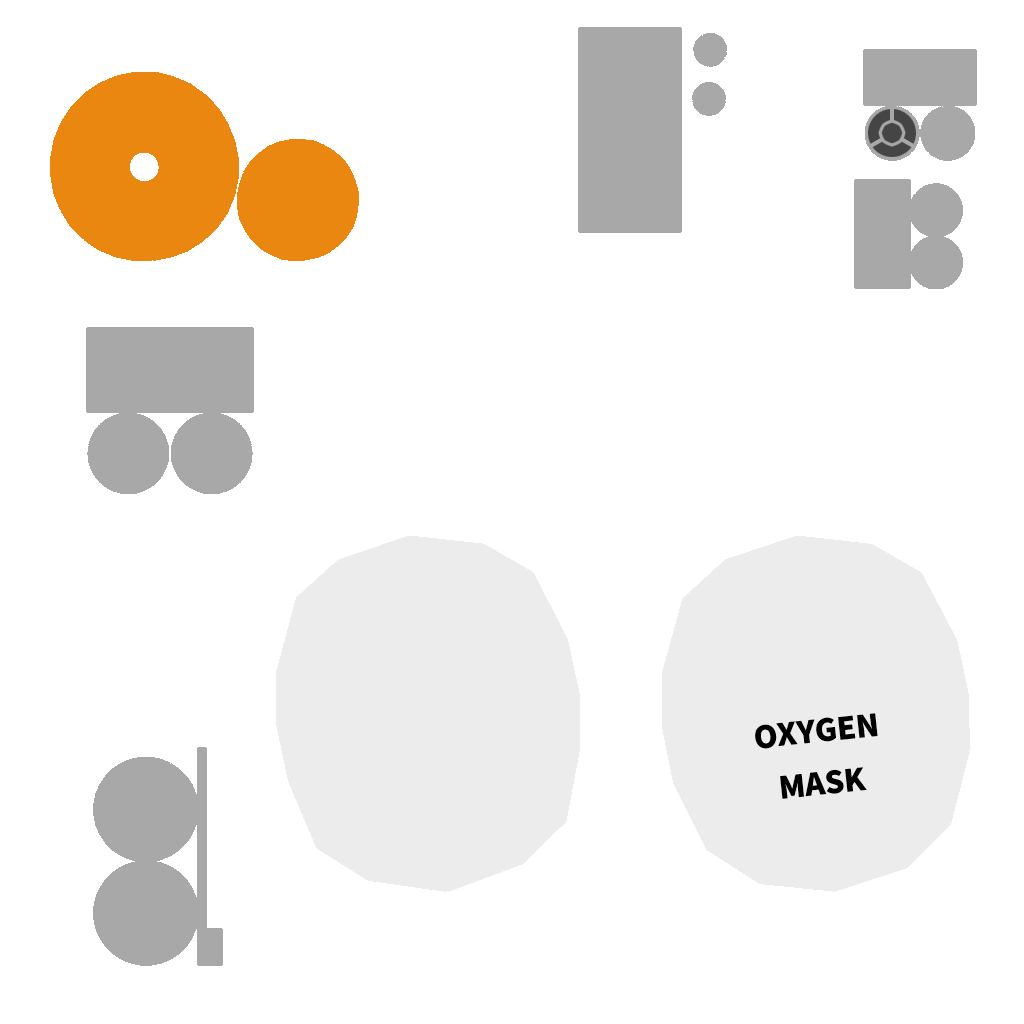
<style>
.page{position:relative;width:1024px;height:1024px;background:#ffffff}
.page>*{position:absolute;margin:0}
.t1{font:30.3px "NotoSansCJKkr-Black";color:#000000}
</style>
<div class="page">
<p class="t1" style="left:755px;top:713px;width:123px;height:86px;text-align:center;rotate:-6deg">OXYGEN<br>MASK</p>
</div>
